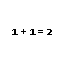
<style>
.page{position:relative;width:64px;height:64px;background:#ffffff}
.page>*{position:absolute;margin:0}
.t1{font:12.3px "Corbel-Bold";color:#000000}
</style>
<div class="page">
<p class="t1" style="left:12px;top:29px;width:40px;height:6px">1 + 1 = 2</p>
</div>
